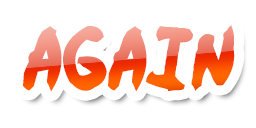
<style>
.page{position:relative;width:256px;height:128px;background:#ffffff}
.page>*{position:absolute;margin:0}
.t1{font:72px "Ninja-Naruto"}
</style>
<div class="page">
<p class="t1" style="left:23px;top:24px;width:212px;height:68px">again</p>
</div>
